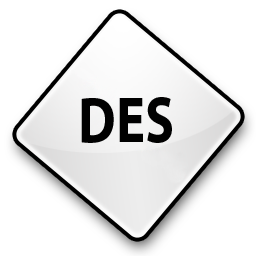
<style>
.page{position:relative;width:256px;height:256px;background:#ffffff}
.page>*{position:absolute;margin:0}
.t1{font:66px "MyriadPro-Bold";letter-spacing:0.005em;color:#010101;scale:0.82 1}
</style>
<div class="page">
<p class="t1" style="left:81px;top:97px;width:91px;height:46px">DES</p>
</div>
